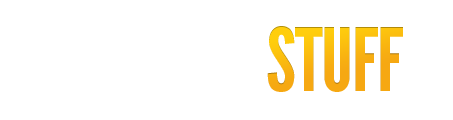
<style>
.page{position:relative;width:453px;height:120px;background:#ffffff}
.page>*{position:absolute;margin:0}
.t1{font:87.6px "LeagueGothic";letter-spacing:-0.015em;color:#f8b210;text-transform:uppercase}
</style>
<div class="page">
<p class="t1" style="left:267px;top:26px;width:136px;height:66px">Stuff</p>
</div>
